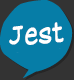
<style>
.page{position:relative;width:74px;height:80px;background:#067da7}
.page>*{position:absolute;margin:0}
.t1{font:30px "SuplexmentaryComicNC";color:#ffffff;scale:0.8 1}
</style>
<div class="page">
<p class="t1" style="left:9px;top:22px;width:55px;height:23px;rotate:-3deg">Jest</p>
</div>
